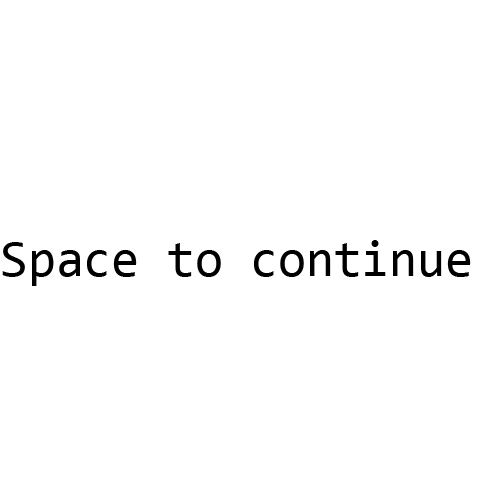
<style>
.page{position:relative;width:480px;height:480px;background:#ffffff}
.page>*{position:absolute;margin:0}
.t1{font:50.5px "Consolas";color:#000000}
</style>
<div class="page">
<p class="t1" style="left:2px;top:240px;width:469px;height:46px">Space to continue</p>
</div>
